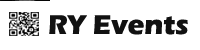
<style>
.page{position:relative;width:200px;height:50px;background:#ffffff}
.page>*{position:absolute;margin:0}
.t1{font:28px "ErasITC-Bold";color:#111111}
</style>
<div class="page">
<p class="t1" style="left:49px;top:15px;width:139px;height:20px">RY Events</p>
</div>
